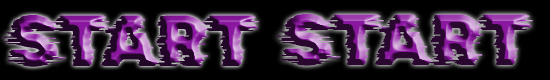
<style>
.page{position:relative;width:550px;height:80px;background:#000000}
.page>*{position:absolute;margin:0}
.t1{font:72px "RubikGlitch-Regular"}
</style>
<div class="page">
<p class="t1" style="left:274px;top:14px;width:259px;height:52px">START</p>
</div>
